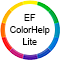
<style>
.page{position:relative;width:60px;height:60px;background:#ffffff}
.page>*{position:absolute;margin:0}
.t1{font:10px "ArialMT";color:#000000;scale:0.9 1}
</style>
<div class="page">
<p class="t1" style="left:10px;top:14px;width:40px;height:31px;text-align:center">EF<br>ColorHelp<br>Lite</p>
</div>
